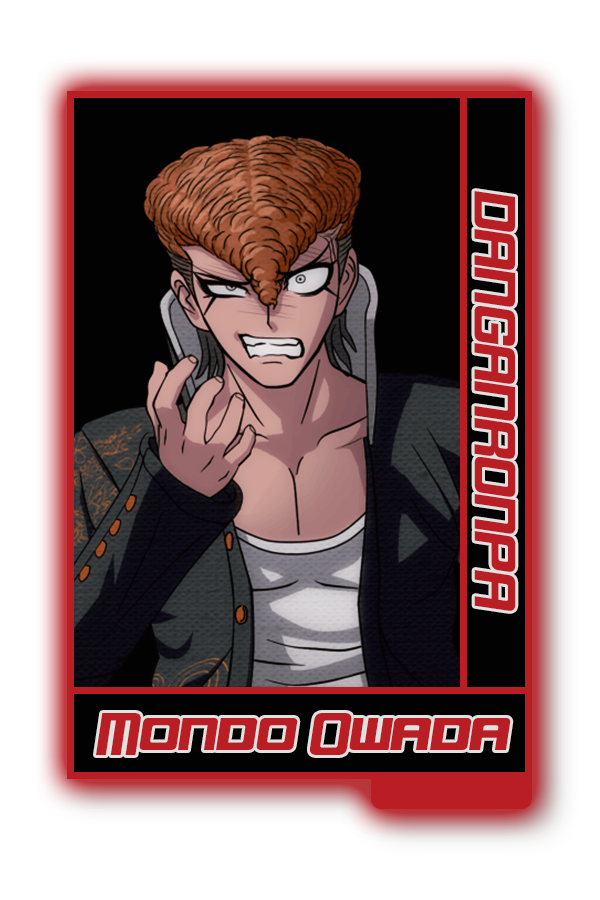
<style>
.page{position:relative;width:600px;height:900px;background:#ffffff}
.page>*{position:absolute;margin:0}
.t1{font:48.8px "DorBlue";color:#bb2c2e}
.t2{font:50.5px "DorBlue";color:#bb2c2e}
</style>
<div class="page">
<p class="t1" style="left:474px;top:191px;width:42px;height:420px;rotate:90deg">DANGANRONPA</p>
<p class="t2" style="left:96px;top:713px;width:415px;height:42px">Mondo Owada</p>
</div>
